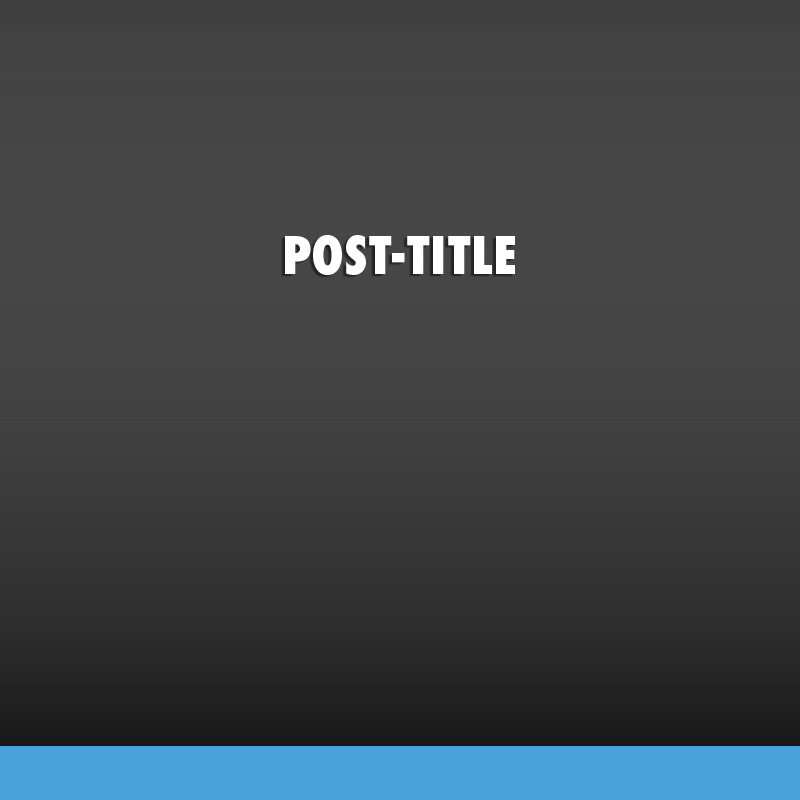
<style>
.page{position:relative;width:800px;height:800px}
.page>*{position:absolute;margin:0}
.t1{font:50.7px "Futura-CondensedExtraBold";color:#ffffff;text-transform:uppercase}
</style>
<div class="page">
<p class="t1" style="left:285px;top:235px;width:230px;height:40px">Post-Title</p>
</div>
